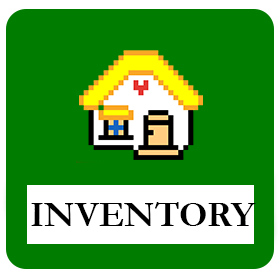
<style>
.page{position:relative;width:280px;height:280px;background:#007d00}
.page>*{position:absolute;margin:0}
.t1{font:36px "Garamond-Bold";color:#000000}
</style>
<div class="page">
<p class="t1" style="left:31px;top:202px;width:225px;height:24px">INVENTORY</p>
</div>
